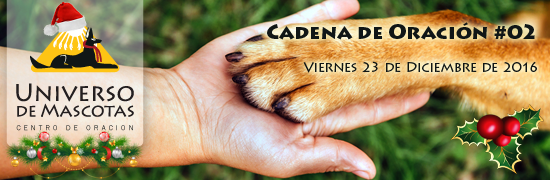
<style>
.page{position:relative;width:550px;height:180px}
.page>*{position:absolute;margin:0}
.t1{font:20px "LithosPro-Black";color:#101616}
.t2{font:14px "LithosPro-Regular";color:#101616}
</style>
<div class="page">
<p class="t1" style="left:267px;top:22px;width:268px;height:18px">Cadena de Oración #02</p>
<p class="t2" style="left:303px;top:61px;width:234px;height:12px">Viernes 23 de Diciembre de 2016</p>
</div>
